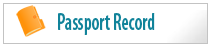
<style>
.page{position:relative;width:211px;height:47px;background:#ffffff}
.page>*{position:absolute;margin:0}
.t1{font:24px "MyriadPro-SemiboldCond";color:#11839a;scale:0.78 1}
</style>
<div class="page">
<p class="t1" style="left:58px;top:13px;width:97px;height:22px">Passport Record</p>
</div>
